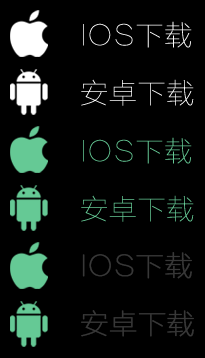
<style>
.page{position:relative;width:205px;height:358px;background:#000000}
.page>*{position:absolute;margin:0}
.t1{font:28px "FZLTCXHJW--GB1-0";color:#383838;font-weight:bold}
</style>
<div class="page">
<p class="t1" style="left:82px;top:252px;width:110px;height:27px">IOS下载</p>
<p class="t1" style="left:81px;top:310px;width:113px;height:27px">安卓下载</p>
</div>
